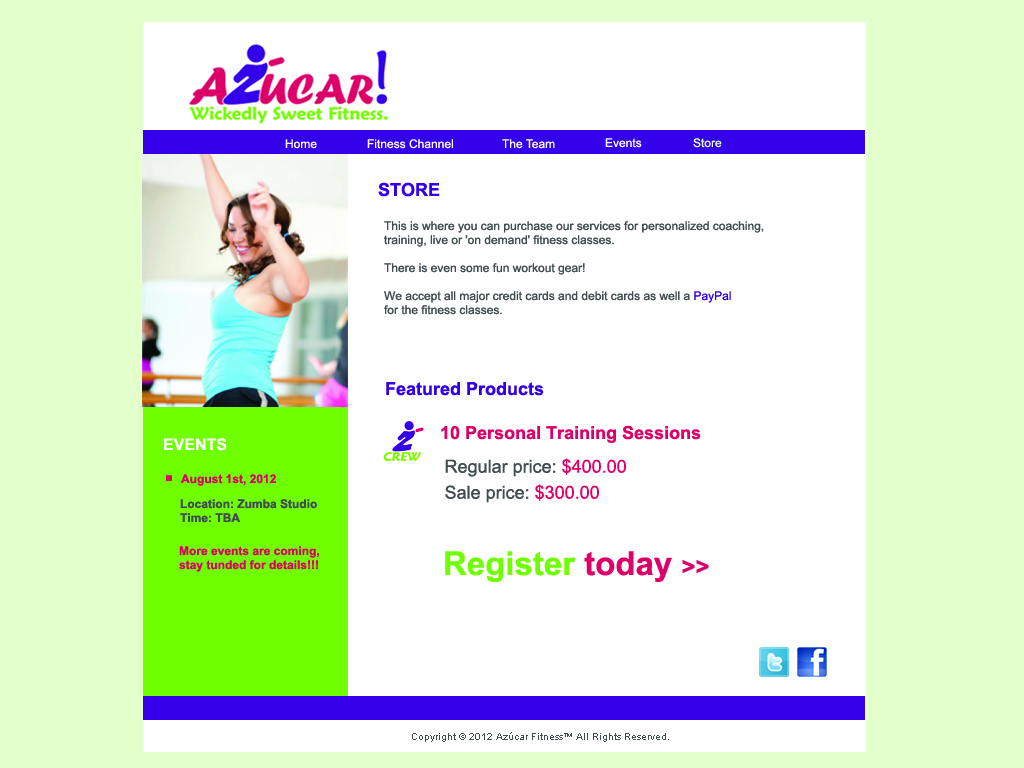
<style>
.page{position:relative;width:1024px;height:768px;background:#ffffff}
.page>*{position:absolute;margin:0}
.t1{font:12px "ArialMT";color:#ffffff}
.t2{font:12px "ArialMT";color:#e2ffcc}
.t3{font:18px "Arial-BoldMT";color:#3400e9}
.t4{font:12px/14px "ArialMT";color:#404e4f}
.t5{font:12px/14px "ArialMT";color:#3400ea}
.t6{font:18px "Arial-BoldMT";color:#dc0068}
.t7{font:16px "Arial-BoldMT";color:#ffffff}
.t8{font:18px/26px "ArialMT";color:#404e4f}
.t9{font:18px/26px "ArialMT";color:#dc0068}
.t10{font:12px "Arial-BoldMT";color:#dc0068}
.t11{font:12px/14px "Arial-BoldMT";color:#404d4f}
.t12{font:12px/14px "Arial-BoldMT";color:#dc0068}
.t13{font:33px "Arial-BoldMT";color:#70ff00}
.t14{font:33px "Arial-BoldMT";color:#dc0068}
.t15{font:24px "Arial-BoldMT";color:#dc0068}
.t16{font:10px "ArialMT";color:#404e4f}
</style>
<div class="page">
<p class="t1" style="left:285px;top:139px;width:32px;height:10px">Home</p>
<p class="t1" style="left:367px;top:139px;width:86px;height:10px">Fitness Channel</p>
<p class="t1" style="left:502px;top:139px;width:53px;height:10px">The Team</p>
<p class="t1" style="left:605px;top:138px;width:37px;height:10px">Events</p>
<p class="t2" style="left:693px;top:138px;width:29px;height:10px">Store</p>
<p class="t3" style="left:378px;top:182px;width:62px;height:15px">STORE</p>
<p class="t4" style="left:384px;top:221px;width:380px;height:94px">This is where you can purchase our services for personalized coaching, <br>training, live or 'on demand' fitness classes.<br><br>There is even some fun workout gear!<br><br>We accept all major credit cards and debit cards as well a <span class="t5">PayPal<br></span>for the fitness classes.</p>
<p class="t3" style="left:386px;top:382px;width:158px;height:14px">Featured Products</p>
<p class="t6" style="left:441px;top:425px;width:260px;height:18px">10 Personal Training Sessions</p>
<p class="t7" style="left:164px;top:438px;width:63px;height:13px">EVENTS</p>
<p class="t8" style="left:445px;top:458px;width:181px;height:45px">Regular price:<span class="t9"> $400.00<br></span>Sale price:<span class="t9"> $300.00</span></p>
<p class="t10" style="left:181px;top:474px;width:95px;height:12px">August 1st, 2012</p>
<p class="t11" style="left:180px;top:499px;width:137px;height:24px">Location: Zumba Studio<br>Time: TBA</p>
<p class="t12" style="left:179px;top:546px;width:140px;height:26px">More events are coming,<br>stay tunded for details!!!</p>
<p class="t13" style="left:445px;top:551px;width:264px;height:31px">Register <span class="t14">today </span><span class="t15">&gt;&gt;</span></p>
<p class="t16" style="left:412px;top:732px;width:257px;height:10px">Copyright © 2012 Azúcar Fitness™ All Rights Reserved.</p>
</div>
